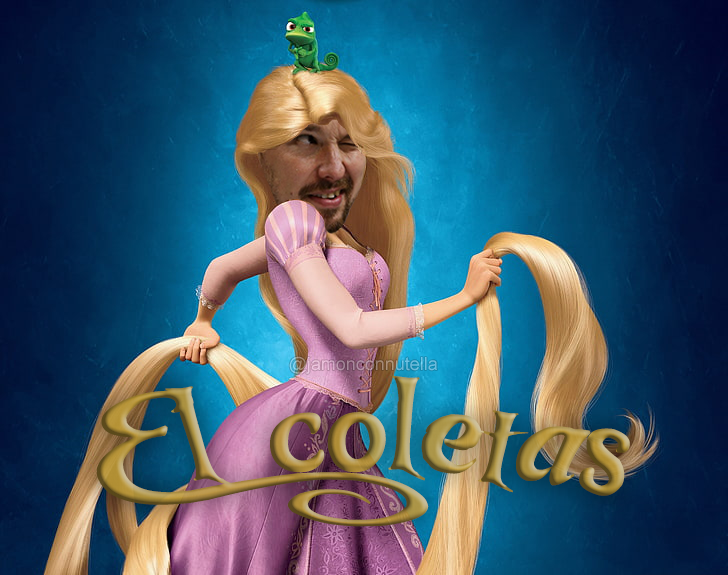
<style>
.page{position:relative;width:728px;height:575px}
.page>*{position:absolute;margin:0}
.t1{font:18px "ArialMT"}
.t2{font:113.5px "Tangled";scale:1.53 1}
</style>
<div class="page">
<p class="t1" style="left:289px;top:356px;width:148px;height:18px">@jamonconnutella</p>
<p class="t2" style="left:96px;top:375px;width:534px;height:152px">El coletas</p>
</div>
